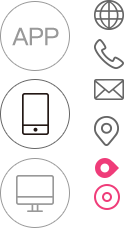
<style>
.page{position:relative;width:125px;height:229px;background:#ffffff}
.page>*{position:absolute;margin:0}
.t1{font:24px "PingFangSC-Regular";color:#999999}
</style>
<div class="page">
<p class="t1" style="left:12px;top:27px;width:47px;height:19px">APP</p>
</div>
